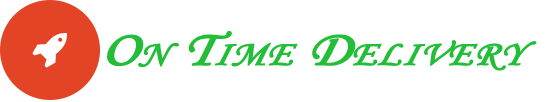
<style>
.page{position:relative;width:550px;height:102px;background:#ffffff}
.page>*{position:absolute;margin:0}
.t1{font:50px "MonotypeCorsiva";color:#22be38;font-variant:small-caps;font-weight:bold;font-style:italic;scale:1.17 1}
</style>
<div class="page">
<p class="t1" style="left:107px;top:30px;width:430px;height:41px">On Time Delivery</p>
</div>
